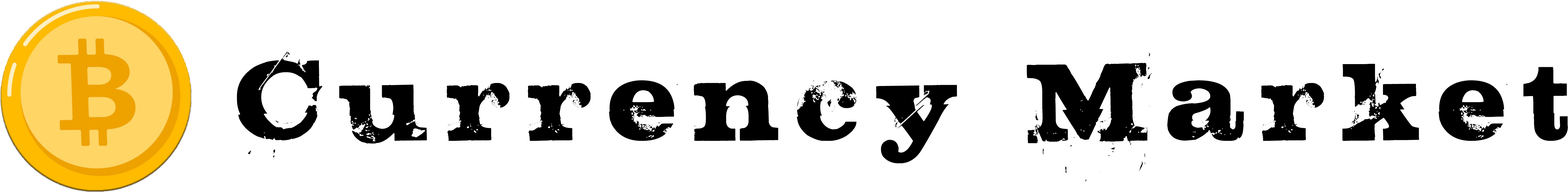
<style>
.page{position:relative;width:1568px;height:192px;background:#ffffff}
.page>*{position:absolute;margin:0}
.t1{font:136.3px "STEAK";letter-spacing:0.145em;color:#000000;scale:0.91 1}
</style>
<div class="page">
<p class="t1" style="left:236px;top:51px;width:1332px;height:130px">Currency Market</p>
</div>
